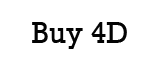
<style>
.page{position:relative;width:160px;height:70px;background:#ffffff}
.page>*{position:absolute;margin:0}
.t1{font:30px "Rockwell";color:#030303}
</style>
<div class="page">
<p class="t1" style="left:32px;top:22px;width:95px;height:27px">Buy 4D</p>
</div>
